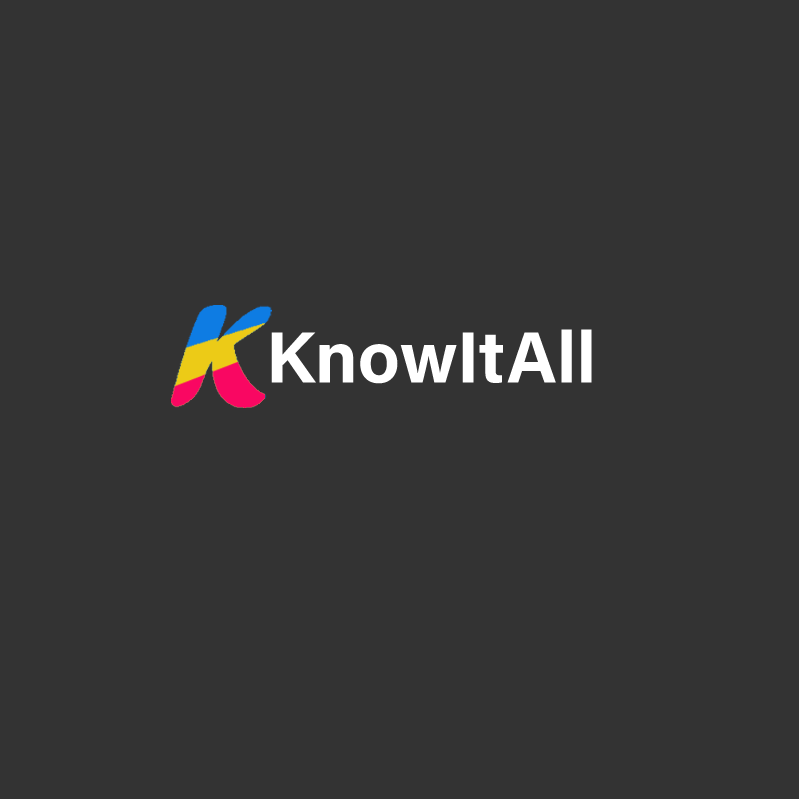
<style>
.page{position:relative;width:799px;height:799px;background:#333333}
.page>*{position:absolute;margin:0}
.t1{font:72.6px "AcuminConcept-Bold";color:#ffffff}
</style>
<div class="page">
<p class="t1" style="left:271px;top:329px;width:321px;height:55px">KnowItAll</p>
</div>
